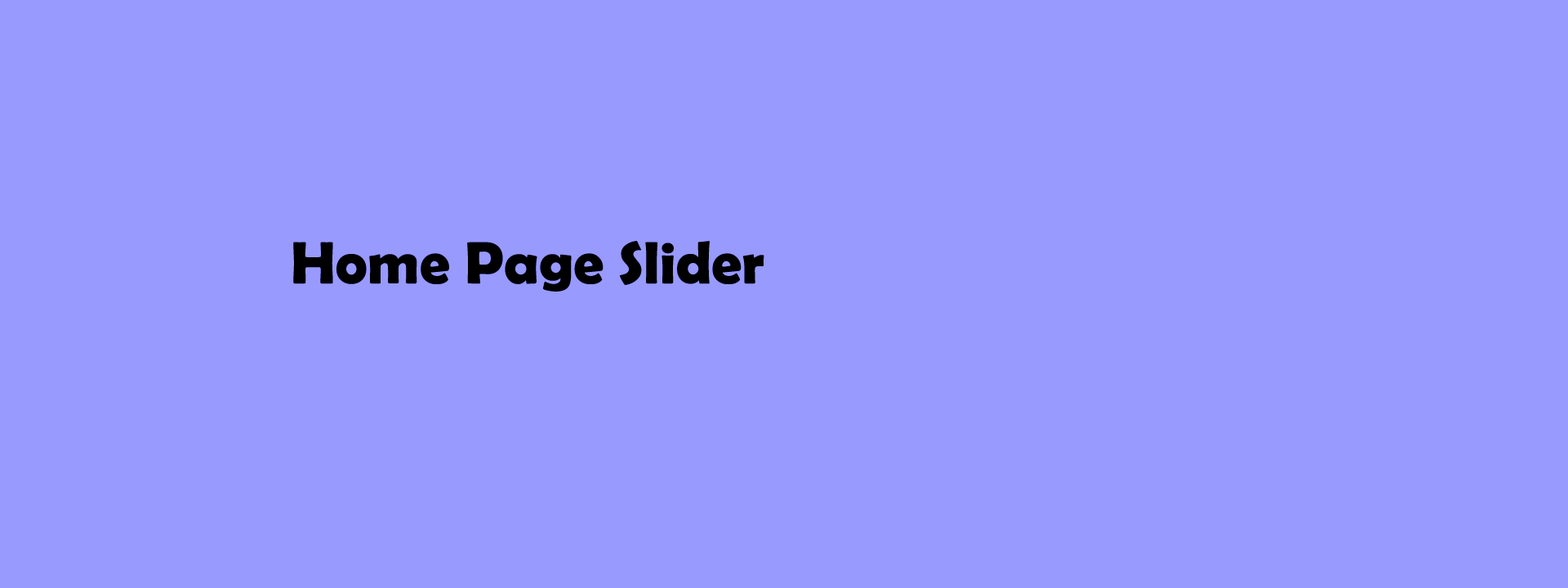
<style>
.page{position:relative;width:1568px;height:588px;background:#989afd}
.page>*{position:absolute;margin:0}
.t1{font:60.1px "BerlinSansFBDemi-Bold";color:#000000}
</style>
<div class="page">
<p class="t1" style="left:293px;top:241px;width:471px;height:51px">Home Page Slider</p>
</div>
